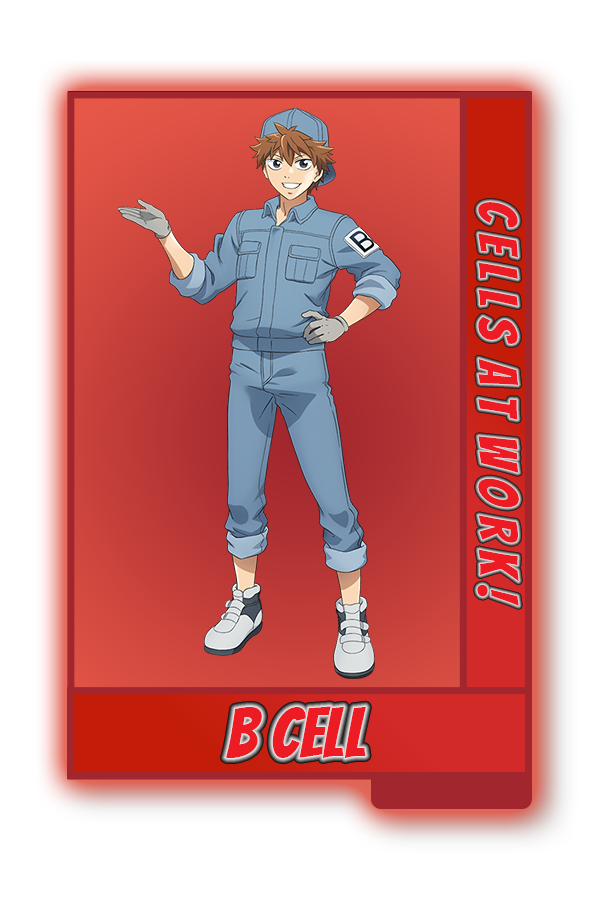
<style>
.page{position:relative;width:600px;height:900px;background:#ffffff}
.page>*{position:absolute;margin:0}
.t1{font:54px "Bangers-Regular";color:#ed1c24}
.t2{font:70px "Bangers-Regular";color:#ed1c24}
</style>
<div class="page">
<p class="t1" style="left:477px;top:202px;width:42px;height:404px;rotate:90deg">C e l l S  A t  W o r k !</p>
<p class="t2" style="left:225px;top:706px;width:141px;height:52px">B Cell</p>
</div>
